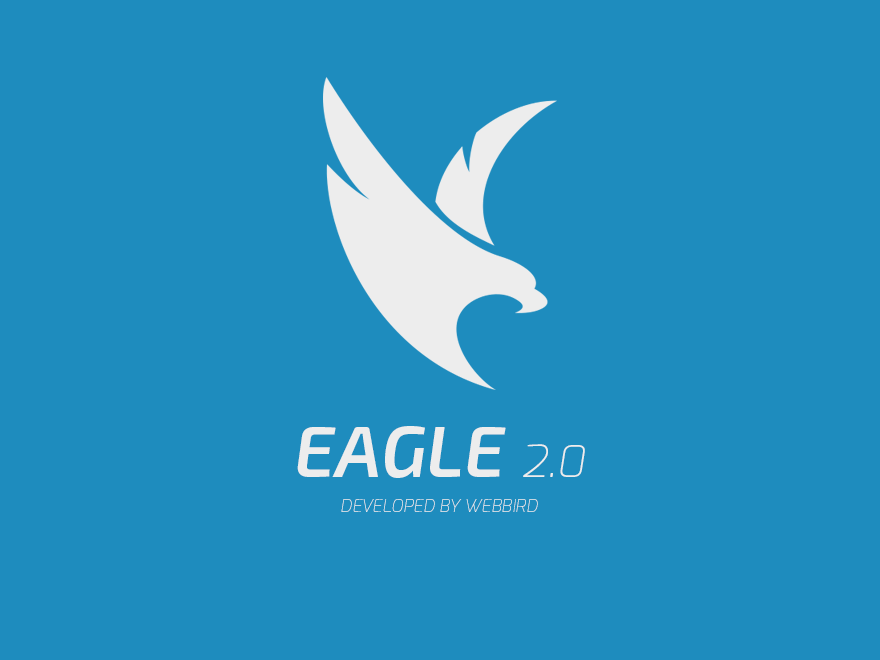
<style>
.page{position:relative;width:880px;height:660px;background:#1e8cbe}
.page>*{position:absolute;margin:0}
.t1{font:72.6px "Exo2-SemiBoldItalic";color:#ededed;text-transform:uppercase}
.t2{font:44px "Exo-ExtraLightItalic";color:#ededed;text-transform:uppercase}
.t3{font:17.6px "Exo-ExtraLightItalic";color:#ededed;text-transform:uppercase}
</style>
<div class="page">
<p class="t1" style="left:297px;top:426px;width:288px;height:52px">Eagle <span class="t2">2.0</span></p>
<p class="t3" style="left:341px;top:499px;width:197px;height:13px">Developed by webbird</p>
</div>
